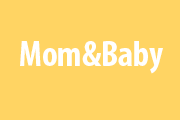
<style>
.page{position:relative;width:180px;height:120px;background:#ffd463}
.page>*{position:absolute;margin:0}
.t1{font:36px "MyriadPro-BoldCond";color:#ffffff}
</style>
<div class="page">
<p class="t1" style="left:20px;top:41px;width:143px;height:33px">Mom&amp;Baby</p>
</div>
